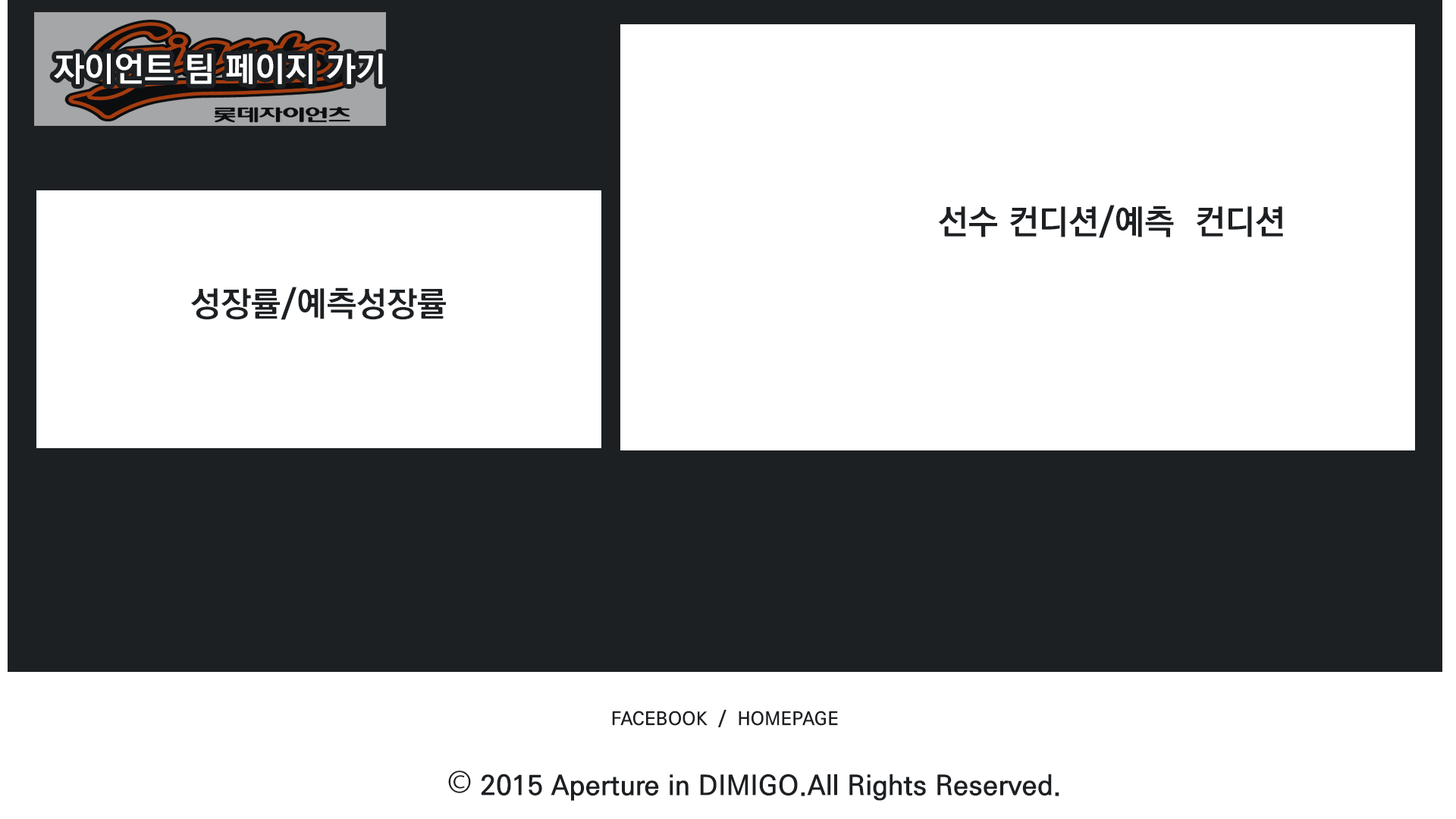
<style>
.page{position:relative;width:1456px;height:819px;background:#ffffff}
.page>*{position:absolute;margin:0}
.t1{font:34.1px "KoPubDotumPB";letter-spacing:0.01em;color:#ffffff}
.t2{font:34.1px "KoPubDotumPB";letter-spacing:0.01em;color:#1d2023}
.t3{font:18.2px "KoPubDotumPB";letter-spacing:0.01em;color:#1d2023}
.t4{font:27.3px "KoPubDotumPB";letter-spacing:0.01em;color:#1d2023}
.t5{font:36.4px "MyriadPro-Regular";letter-spacing:0.01em;color:#1d2023}
</style>
<div class="page">
<p class="t1" style="left:54px;top:53px;width:329px;height:31px">자이언트 팀 페이지 가기</p>
<p class="t2" style="left:938px;top:205px;width:345px;height:33px">선수 컨디션/예측  컨디션</p>
<p class="t2" style="left:191px;top:287px;width:255px;height:33px">성장률/예측성장률</p>
<p class="t3" style="left:612px;top:710px;width:226px;height:17px">FACEBOOK  /  HOMEPAGE</p>
<p class="t4" style="left:448px;top:770px;width:611px;height:31px"><span class="t5">©</span> 2015 Aperture in DIMIGO.All Rights Reserved.</p>
</div>
